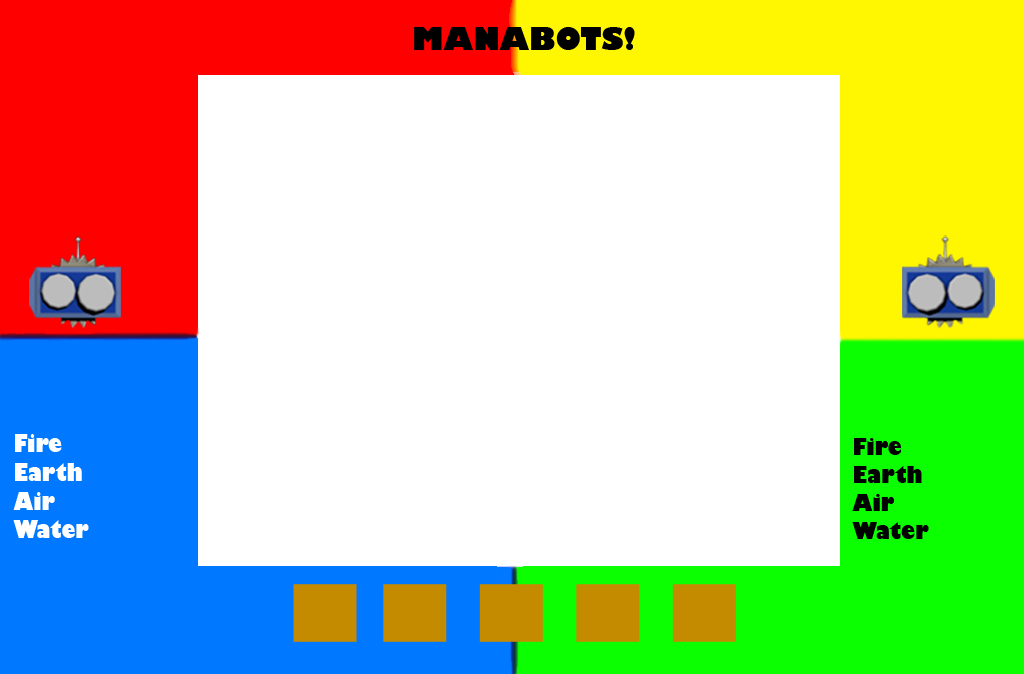
<style>
.page{position:relative;width:1024px;height:674px;background:#ffffff}
.page>*{position:absolute;margin:0}
.t1{font:30px "GillSans-UltraBold";color:#000000}
.t2{font:23.8px "GillSans-UltraBold";color:#ffffff;scale:0.84 1}
.t3{font:23.4px "GillSans-UltraBold";color:#000000;scale:0.86 1}
</style>
<div class="page">
<p class="t1" style="left:414px;top:27px;width:221px;height:23px">MANABOTS!</p>
<p class="t2" style="left:13px;top:434px;width:76px;height:104px">Fire<br>Earth<br>Air<br>Water</p>
<p class="t3" style="left:852px;top:438px;width:77px;height:101px">Fire<br>Earth<br>Air<br>Water</p>
</div>
